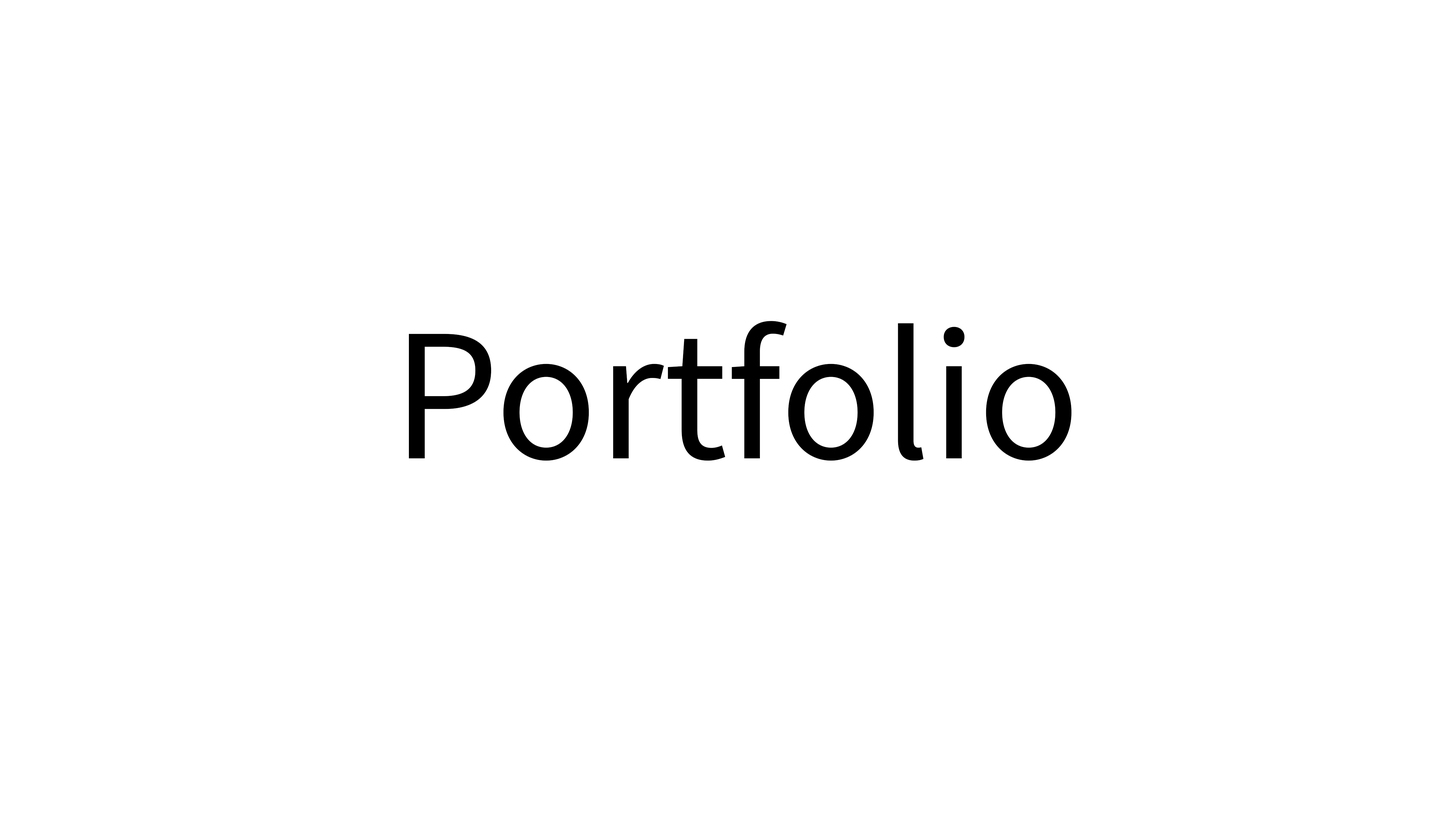
<style>
.page{position:relative;width:1456px;height:819px;background:#ffffff}
.page>*{position:absolute;margin:0}
.t1{font:189.6px "SourceSansRoman-Regular";color:#000000}
</style>
<div class="page">
<p class="t1" style="left:409px;top:321px;width:663px;height:140px">Portfolio</p>
</div>
